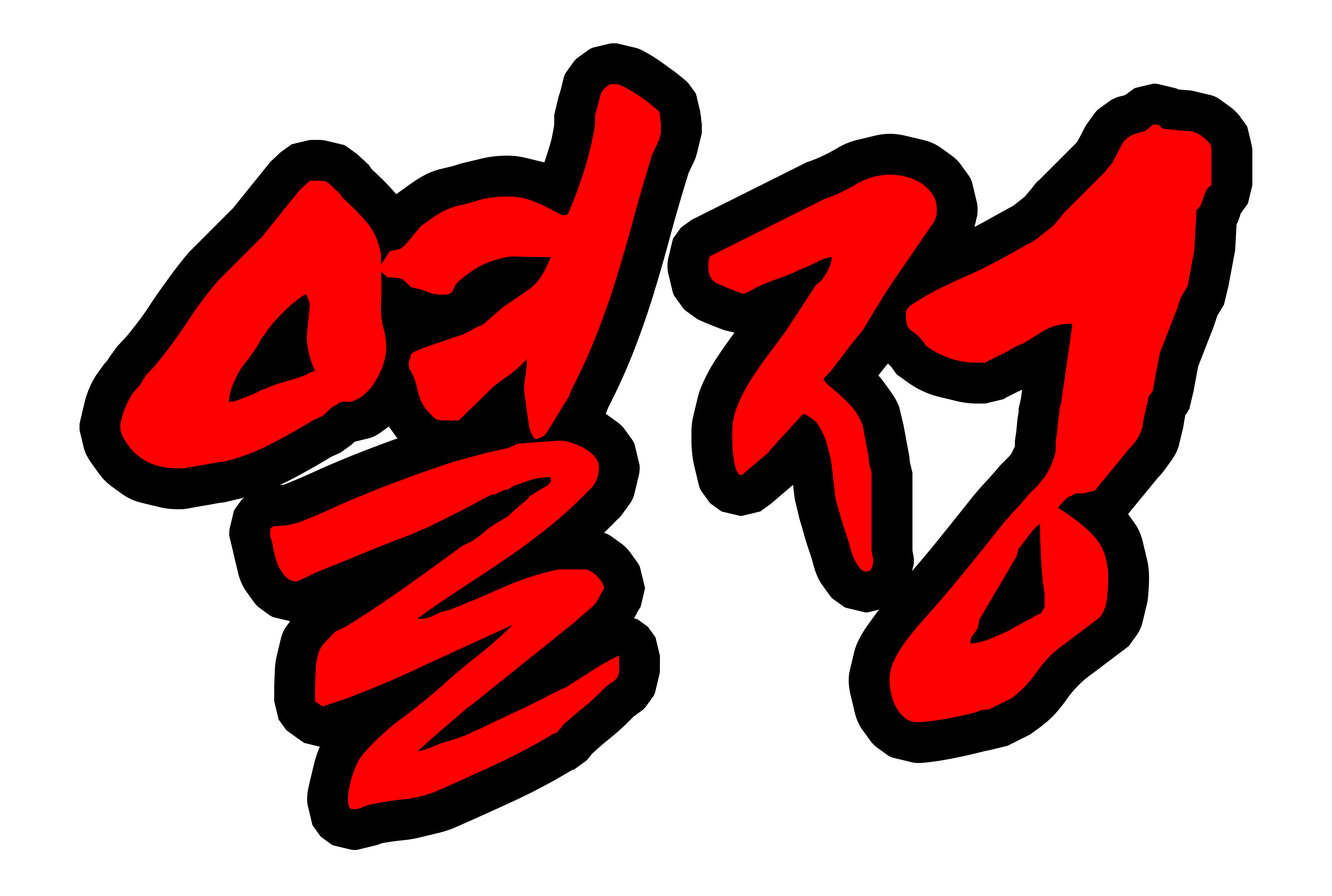
<style>
.page{position:relative;width:1332px;height:896px;background:#ffffff}
.page>*{position:absolute;margin:0}
.t1{font:748.5px "JSArirang-Regular";color:#ff0000}
</style>
<div class="page">
<p class="t1" style="left:120px;top:84px;width:1091px;height:725px">열정</p>
</div>
